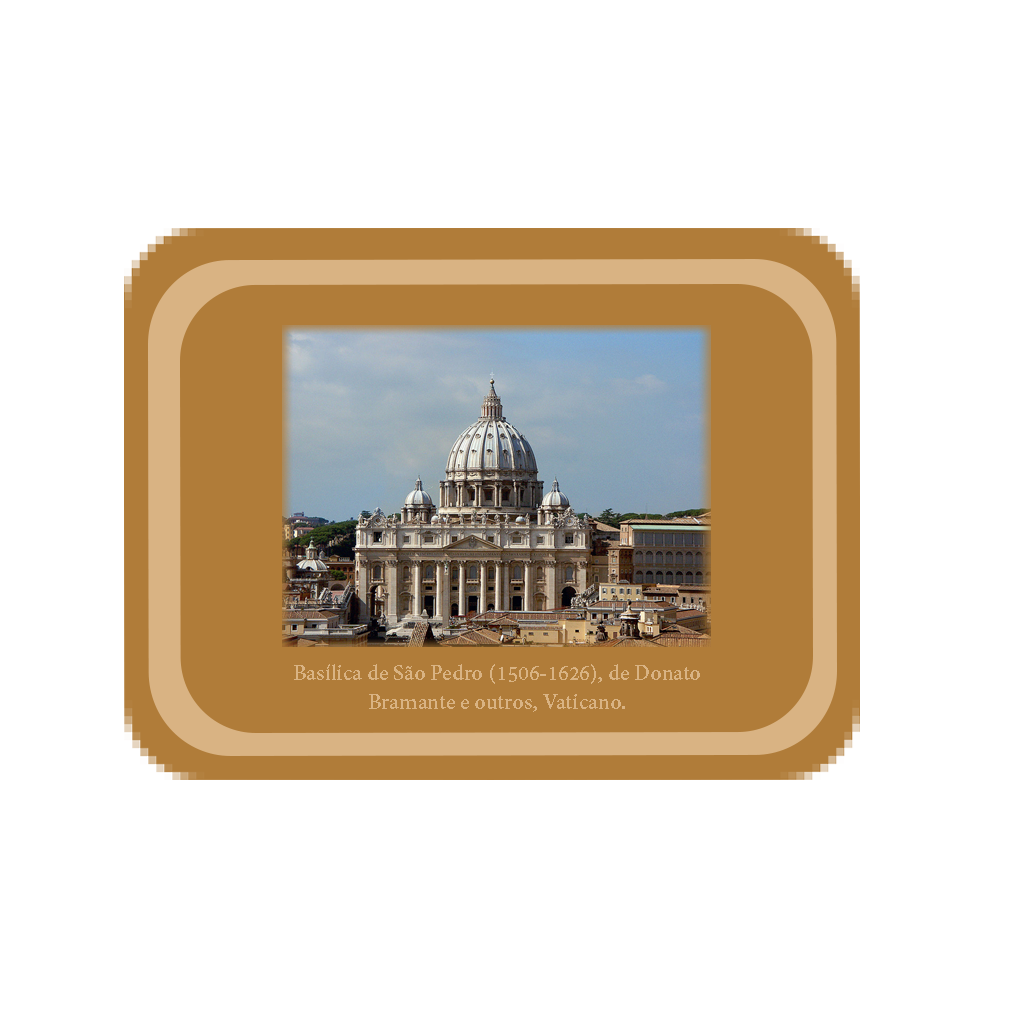
<style>
.page{position:relative;width:1024px;height:1024px;background:#ffffff}
.page>*{position:absolute;margin:0}
.t1{font:24.2px "AdobeDevanagari-Bold";color:#d9b383}
</style>
<div class="page">
<p class="t1" style="left:294px;top:664px;width:406px;height:48px;text-align:center">Basílica de São Pedro (1506-1626), de Donato Bramante e outros, Vaticano.</p>
</div>
